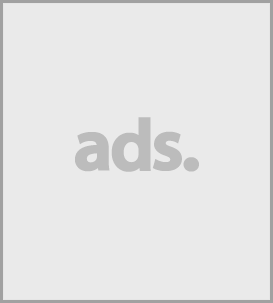
<style>
.page{position:relative;width:273px;height:303px;background:#eaeaea}
.page>*{position:absolute;margin:0}
.t1{font:101px "was@peenang";color:#bcbcbc}
</style>
<div class="page">
<p class="t1" style="left:75px;top:117px;width:124px;height:55px">ads.</p>
</div>
